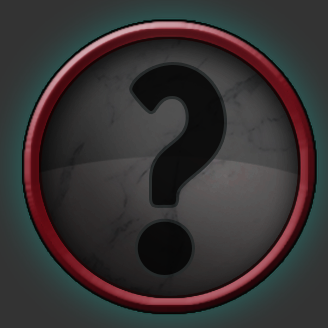
<style>
.page{position:relative;width:328px;height:328px}
.page>*{position:absolute;margin:0}
.t1{font:242.3px "HoboStd";color:#0c0c0c}
</style>
<div class="page">
<p class="t1" style="left:132px;top:65px;width:92px;height:210px">?</p>
</div>
